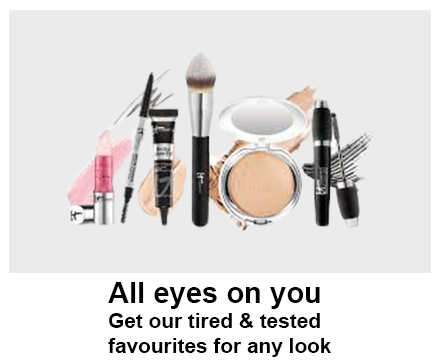
<style>
.page{position:relative;width:440px;height:364px;background:#ebebeb}
.page>*{position:absolute;margin:0}
.t1{font:20.8px/25px "Arial-BoldMT";color:#000000}
.t2{font:29.2px/25px "Arial-BoldMT";color:#000000}
</style>
<div class="page">
<p class="t1" style="left:108px;top:282px;width:223px;height:75px"><span class="t2">All eyes on you<br></span>Get our tired &amp; tested<br>favourites for any look</p>
</div>
